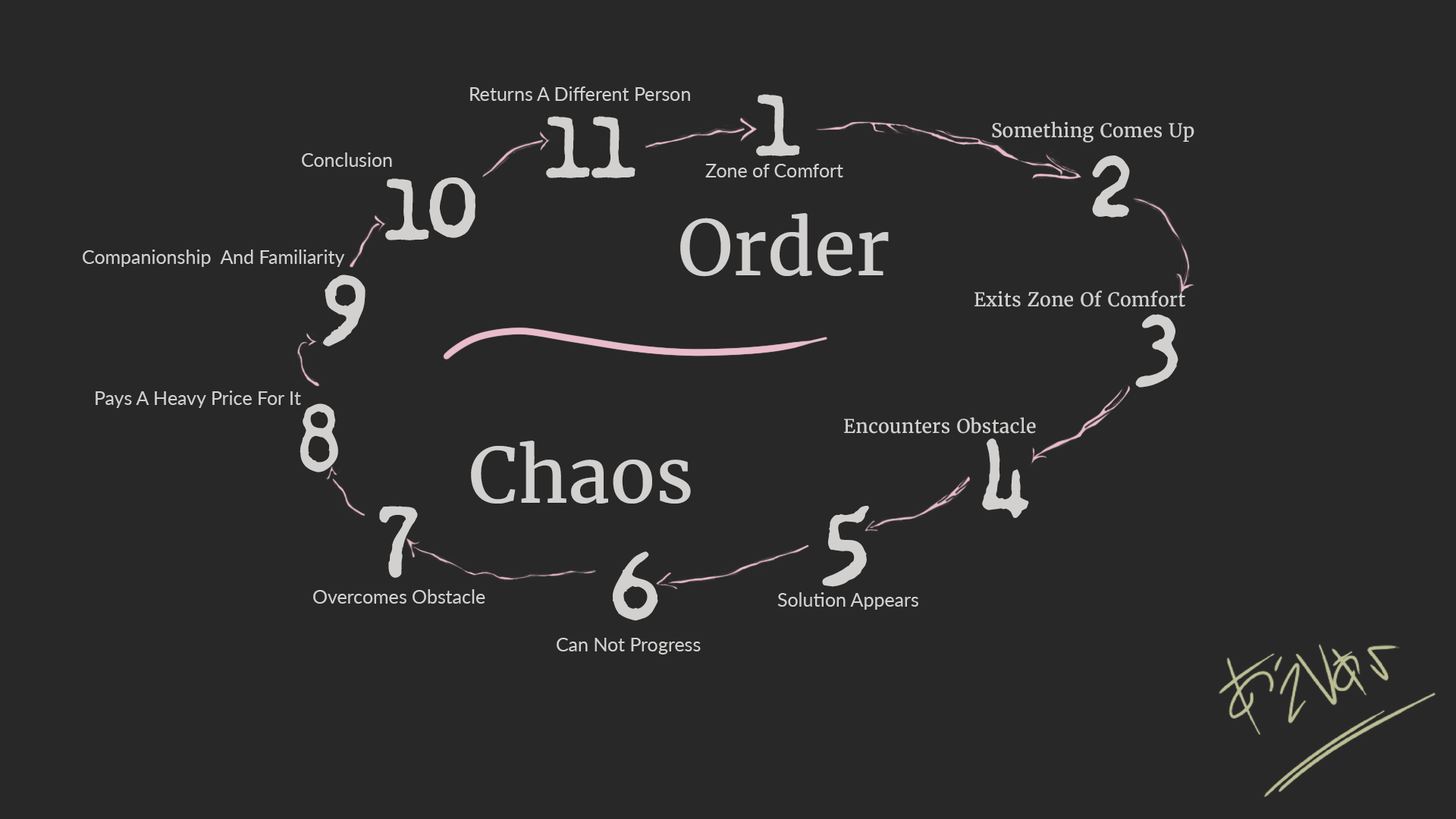
<style>
.page{position:relative;width:1456px;height:819px;background:#282828}
.page>*{position:absolute;margin:0}
.t1{font:19px "Lato-Regular";color:#d2d1cf}
.t2{font:75.8px "Chandler42-Noir";color:#d2d1cf}
.t3{font:19px "Merriweather";color:#d2d1cf}
.t4{font:75.8px "Merriweather";color:#d2d1cf}
</style>
<div class="page">
<p class="t1" style="left:470px;top:86px;width:220px;height:15px">Returns A Different Person</p>
<p class="t2" style="left:756px;top:94px;width:44px;height:62px">1</p>
<p class="t2" style="left:546px;top:116px;width:89px;height:62px">11</p>
<p class="t3" style="left:992px;top:121px;width:202px;height:22px">Something Comes Up</p>
<p class="t1" style="left:302px;top:152px;width:90px;height:15px">Conclusion</p>
<p class="t2" style="left:1092px;top:155px;width:38px;height:63px">2</p>
<p class="t1" style="left:705px;top:164px;width:138px;height:13px">Zone of Comfort</p>
<p class="t2" style="left:385px;top:177px;width:90px;height:63px">10</p>
<p class="t4" style="left:680px;top:213px;width:209px;height:64px">Order</p>
<p class="t1" style="left:83px;top:249px;width:262px;height:18px">Companionship  And Familiarity</p>
<p class="t2" style="left:323px;top:275px;width:43px;height:72px">9</p>
<p class="t3" style="left:974px;top:290px;width:211px;height:17px">Exits Zone Of Comfort</p>
<p class="t2" style="left:1135px;top:314px;width:43px;height:74px">3</p>
<p class="t1" style="left:96px;top:391px;width:205px;height:17px">Pays A Heavy Price For It</p>
<p class="t2" style="left:300px;top:403px;width:38px;height:69px">8</p>
<p class="t3" style="left:844px;top:417px;width:192px;height:17px">Encounters Obstacle</p>
<p class="t4" style="left:471px;top:441px;width:220px;height:63px">Chaos</p>
<p class="t2" style="left:982px;top:438px;width:47px;height:80px">4</p>
<p class="t2" style="left:379px;top:506px;width:39px;height:72px">7</p>
<p class="t2" style="left:822px;top:506px;width:47px;height:81px">5</p>
<p class="t2" style="left:613px;top:551px;width:45px;height:70px">6</p>
<p class="t1" style="left:313px;top:589px;width:172px;height:15px">Overcomes Obstacle</p>
<p class="t1" style="left:777px;top:592px;width:141px;height:18px">Solution Appears</p>
<p class="t1" style="left:557px;top:638px;width:144px;height:16px">Can Not Progress</p>
</div>
